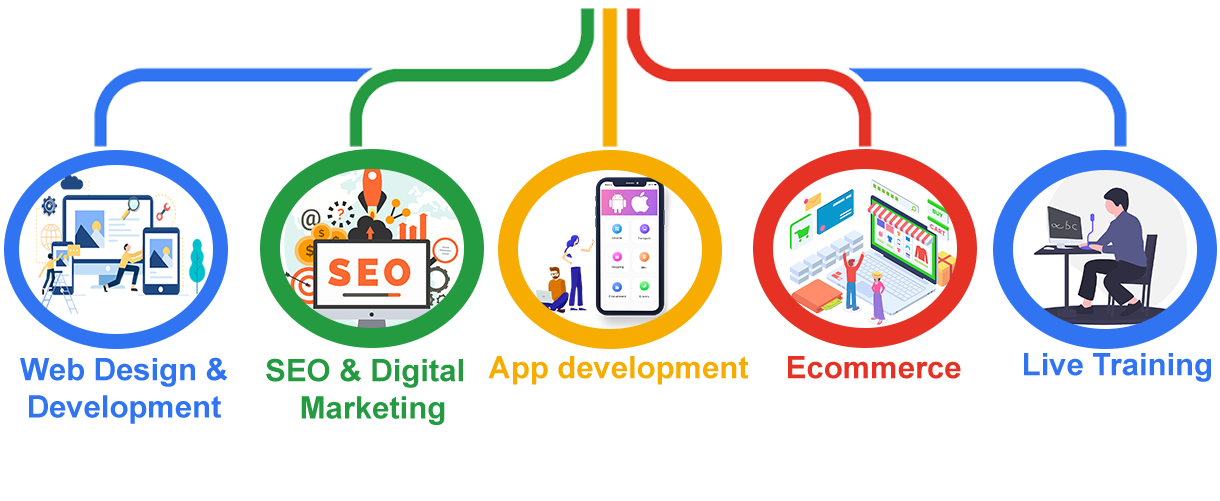
<style>
.page{position:relative;width:1220px;height:501px;background:#ffffff}
.page>*{position:absolute;margin:0}
.t1{font:31px "Arial-BoldMT";color:#3174f1}
.t2{font:31px "Arial-BoldMT";color:#249a41}
.t3{font:31px "Arial-BoldMT";color:#f6ac00}
.t4{font:31px "Arial-BoldMT";color:#e63125}
</style>
<div class="page">
<p class="t1" style="left:1024px;top:353px;width:187px;height:29px">Live Training</p>
<p class="t1" style="left:20px;top:357px;width:208px;height:67px;text-align:center">Web Design &amp; Development</p>
<p class="t2" style="left:266px;top:358px;width:197px;height:67px">SEO &amp; Digital <br>      Marketing</p>
<p class="t3" style="left:488px;top:356px;width:261px;height:29px">App development</p>
<p class="t4" style="left:788px;top:356px;width:173px;height:23px">Ecommerce</p>
</div>
